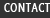
<style>
.page{position:relative;width:50px;height:18px;background:#333333}
.page>*{position:absolute;margin:0}
.t1{font:12.2px "MalgunGothicBold";letter-spacing:0.05em;color:#ffffff;text-transform:uppercase;scale:0.75 1}
</style>
<div class="page">
<p class="t1" style="left:4px;top:3px;width:46px;height:9px">contact</p>
</div>
